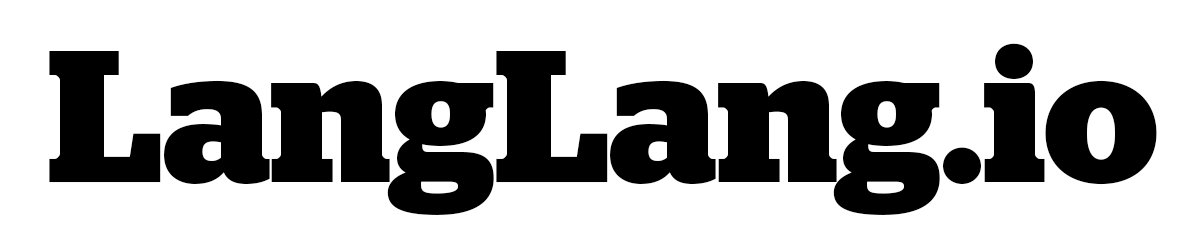
<style>
.page{position:relative;width:1200px;height:250px;background:#ffffff}
.page>*{position:absolute;margin:0}
.t1{font:187.5px "Stag-Bold";color:#000000}
</style>
<div class="page">
<p class="t1" style="left:49px;top:43px;width:1108px;height:172px">LangLang.io</p>
</div>
